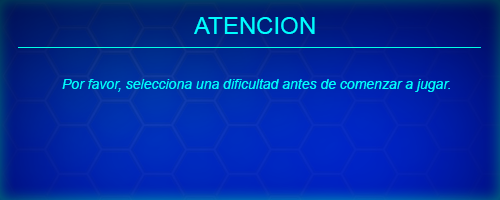
<style>
.page{position:relative;width:500px;height:200px}
.page>*{position:absolute;margin:0}
.t1{font:24px "ArialMT";color:#00fcff}
.t2{font:14px "Arial-ItalicMT";color:#00fcff}
</style>
<div class="page">
<p class="t1" style="left:194px;top:17px;width:121px;height:17px">ATENCION</p>
<p class="t2" style="left:62px;top:79px;width:388px;height:13px">Por favor, selecciona una dificultad antes de comenzar a jugar.</p>
</div>
